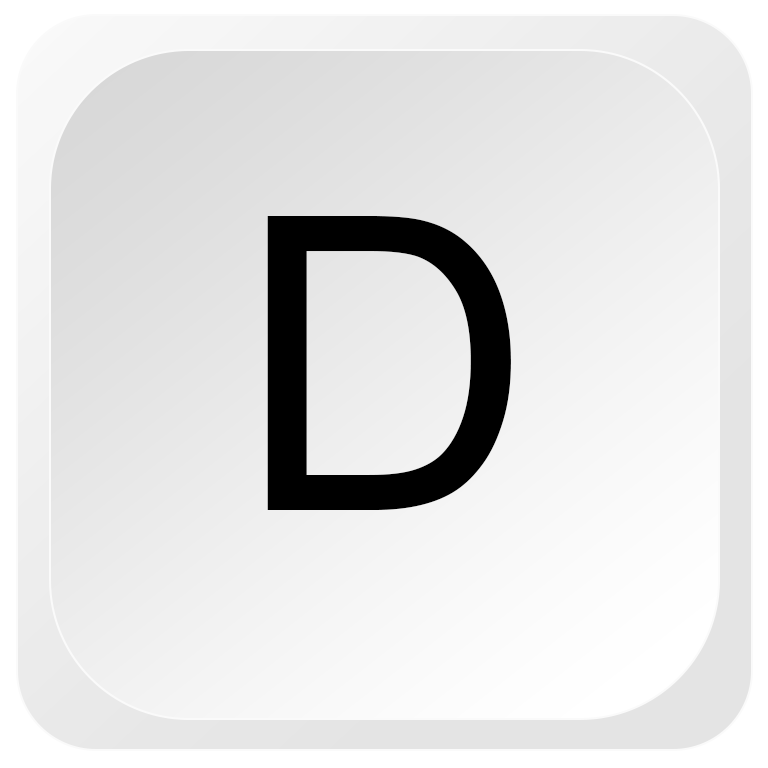
<style>
.page{position:relative;width:768px;height:768px}
.page>*{position:absolute;margin:0}
.t1{font:411px "ArialMT";color:#000000}
</style>
<div class="page">
<p class="t1" style="left:267px;top:216px;width:244px;height:294px">D</p>
</div>
